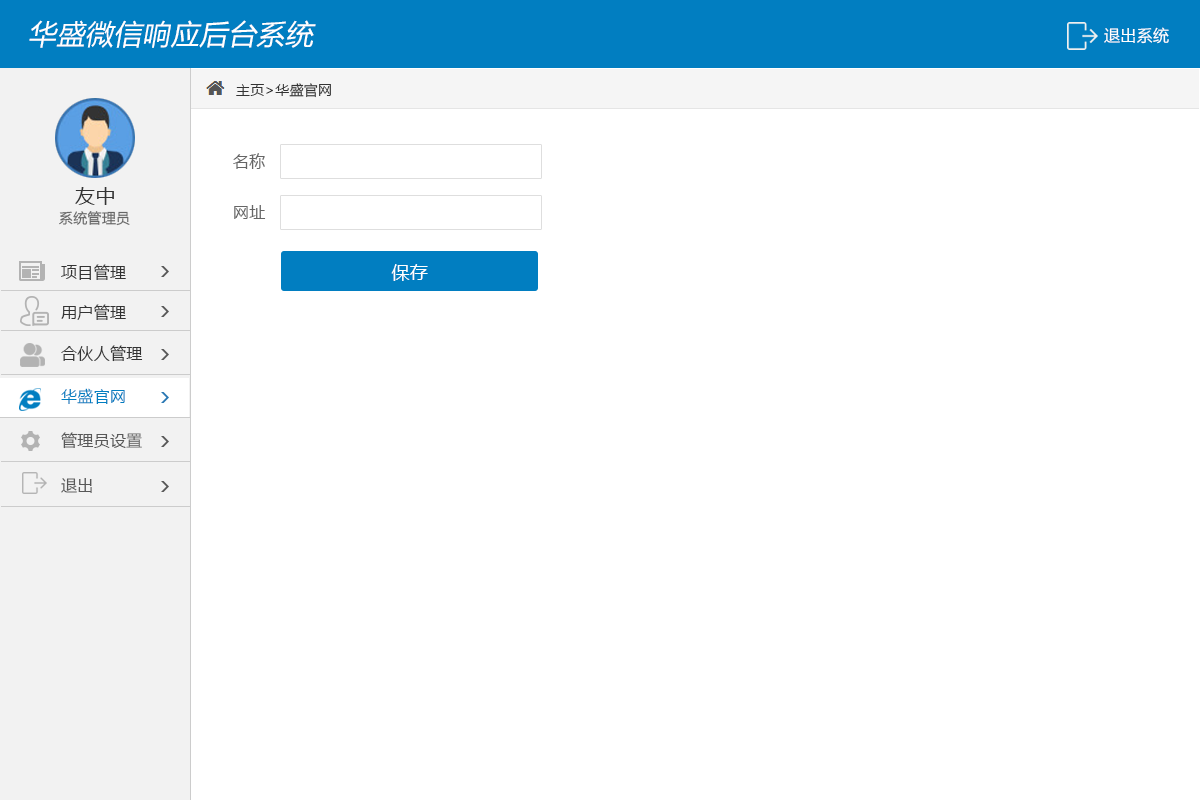
<style>
.page{position:relative;width:1200px;height:800px;background:#ffffff}
.page>*{position:absolute;margin:0}
.t1{font:28px "MicrosoftYaHei";letter-spacing:0.02em;color:#ffffff;font-style:italic}
.t2{font:16px "MicrosoftYaHei";letter-spacing:0.02em;color:#ffffff}
.t3{font:14px "MicrosoftYaHei";letter-spacing:0.02em;color:#333333}
.t4{font:16px "MicrosoftYaHei";letter-spacing:0.02em;color:#666666}
.t5{font:20px "MicrosoftYaHei";letter-spacing:0.02em;color:#333333}
.t6{font:14px "MicrosoftYaHei";letter-spacing:0.02em;color:#666666}
.t7{font:16px "MicrosoftYaHei";letter-spacing:0.02em;color:#333333}
.t8{font:18px "MicrosoftYaHei";letter-spacing:0.02em;color:#ffffff}
.t9{font:16px "MicrosoftYaHei";letter-spacing:0.02em;color:#017ec1}
.t10{font:16px "MicrosoftYaHei";letter-spacing:0.02em;color:#585858}
</style>
<div class="page">
<p class="t1" style="left:29px;top:20px;width:287px;height:28px">华盛微信响应后台系统</p>
<p class="t2" style="left:1104px;top:27px;width:65px;height:17px">退出系统</p>
<p class="t3" style="left:236px;top:83px;width:95px;height:15px">主页&gt;华盛官网</p>
<p class="t4" style="left:233px;top:153px;width:32px;height:16px">名称</p>
<p class="t5" style="left:75px;top:187px;width:39px;height:18px">友中</p>
<p class="t4" style="left:234px;top:205px;width:32px;height:14px">网址</p>
<p class="t6" style="left:59px;top:211px;width:71px;height:15px">系统管理员</p>
<p class="t7" style="left:61px;top:264px;width:65px;height:16px">项目管理</p>
<p class="t8" style="left:391px;top:264px;width:37px;height:17px">保存</p>
<p class="t7" style="left:61px;top:304px;width:65px;height:16px">用户管理</p>
<p class="t7" style="left:61px;top:345px;width:82px;height:17px">合伙人管理</p>
<p class="t9" style="left:61px;top:388px;width:64px;height:16px">华盛官网</p>
<p class="t10" style="left:61px;top:432px;width:81px;height:17px">管理员设置</p>
<p class="t10" style="left:61px;top:478px;width:31px;height:15px">退出</p>
</div>
